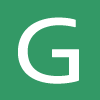
<style>
.page{position:relative;width:100px;height:100px;background:#339966}
.page>*{position:absolute;margin:0}
.t1{font:96px "Corbel";letter-spacing:0.1em;color:#ffffff;font-weight:bold;scale:1.18 1}
</style>
<div class="page">
<p class="t1" style="left:18px;top:17px;width:61px;height:67px">G</p>
</div>
